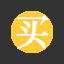
<style>
.page{position:relative;width:64px;height:64px;background:#333333}
.page>*{position:absolute;margin:0}
.t1{font:37.1px "STZhongsong";letter-spacing:0.05em;color:#ffffff;font-weight:bold;scale:0.94 1}
</style>
<div class="page">
<p class="t1" style="left:16px;top:15px;width:33px;height:34px">买</p>
</div>
